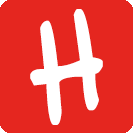
<style>
.page{position:relative;width:133px;height:133px;background:#e5261f}
.page>*{position:absolute;margin:0}
.t1{font:200px "CompleteinHim";letter-spacing:0.068em;color:#ffffff;scale:0.85 1}
</style>
<div class="page">
<p class="t1" style="left:30px;top:9px;width:73px;height:116px">H</p>
</div>
